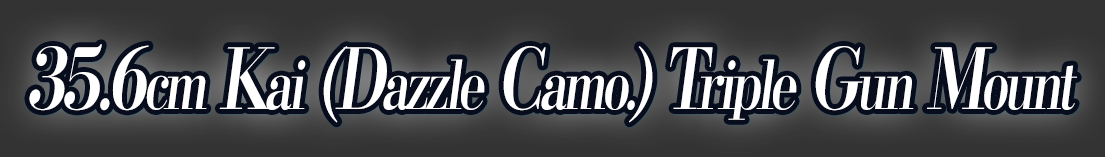
<style>
.page{position:relative;width:1105px;height:157px}
.page>*{position:absolute;margin:0}
.t1{font:67.2px "KochoStd-Heavy";letter-spacing:-0.08em;color:#ffffff;font-style:italic;scale:0.75 1}
.t2{font:84px "KochoStd-Heavy";letter-spacing:-0.08em;color:#ffffff;font-style:italic;scale:0.75 1}
</style>
<div class="page">
<p class="t1" style="left:29px;top:44px;width:1048px;height:79px"><span class="t2">35.6</span>cm<span class="t2"> K</span>ai<span class="t2"> (D</span>azzle<span class="t2"> C</span>amo.<span class="t2">) T</span>riple<span class="t2"> G</span>un<span class="t2"> M</span>ount</p>
</div>
